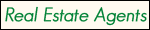
<style>
.page{position:relative;width:150px;height:30px;background:#fffaf0}
.page>*{position:absolute;margin:0}
.t1{font:19px "GeosansLight-Oblique";color:#008135;font-weight:bold}
</style>
<div class="page">
<p class="t1" style="left:5px;top:6px;width:142px;height:20px">Real Estate Agents</p>
</div>
